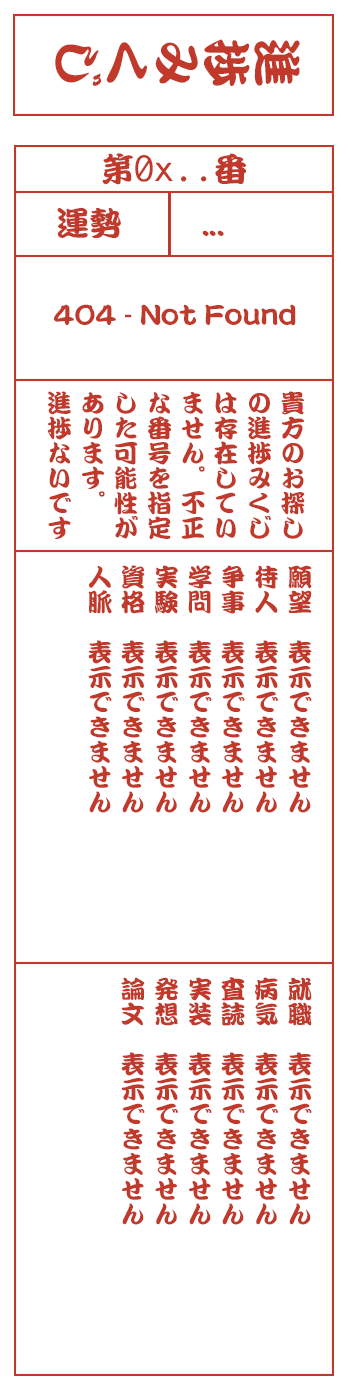
<style>
.page{position:relative;width:350px;height:1400px;background:#ffffff}
.page>*{position:absolute;margin:0}
.t1{font:50px "DFKanTeiRyu-XB-MP-RKSJ-H";color:#c0392b}
.t2{font:33.3px "Monaco";color:#c0392b}
.t3{font:33.3px "DFKanTeiRyu-XB-MP-RKSJ-H";color:#c0392b}
.t4{font:25px "DFKanTeiRyu-XB-MP-RKSJ-H";color:#c0392b}
.t5{font:25px/33.3px "DFKanTeiRyu-XB-MP-RKSJ-H";color:#c0392b}
</style>
<div class="page">
<p class="t1" style="left:55px;top:39px;width:245px;height:47px;rotate:90deg">進捗みくじ</p>
<p class="t2" style="left:102px;top:153px;width:144px;height:32px"><span class="t3">第</span>0x..<span class="t3">番</span></p>
<p class="t3" style="left:57px;top:207px;width:64px;height:31px">運勢</p>
<p class="t3" style="left:202px;top:230px;width:22px;height:6px">...</p>
<p class="t4" style="left:54px;top:304px;width:242px;height:22px">404 - Not Found</p>
<p class="t5" style="left:47px;top:391px;width:258px;height:148px">貴方のお探し<br>の進捗みくじ<br>は存在してい<br>ません。不正<br>な番号を指定<br>した可能性が<br>あります。<br>進捗ないです</p>
<p class="t5" style="left:88px;top:565px;width:224px;height:248px">願望　表示できません<br>待人　表示できません<br>争事　表示できません<br>学問　表示できません<br>実験　表示できません<br>資格　表示できません<br>人脈　表示できません</p>
<p class="t5" style="left:121px;top:977px;width:191px;height:248px">就職　表示できません<br>病気　表示できません<br>査読　表示できません<br>実装　表示できません<br>発想　表示できません<br>論文　表示できません</p>
</div>
